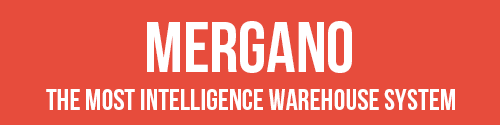
<style>
.page{position:relative;width:500px;height:125px;background:#e74c3c}
.page>*{position:absolute;margin:0}
.t1{font:72px "BebasNeue";color:#ffffff}
.t2{font:30px "BebasNeue";color:#ffffff}
</style>
<div class="page">
<p class="t1" style="left:147px;top:21px;width:205px;height:52px">Mergano</p>
<p class="t2" style="left:46px;top:89px;width:409px;height:21px">THE MOST INTELLIGENCE WAREHOUSE SYSTEM</p>
</div>
